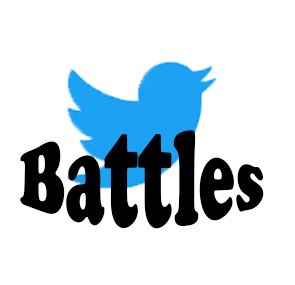
<style>
.page{position:relative;width:295px;height:285px;background:#ffffff}
.page>*{position:absolute;margin:0}
.t1{font:65.3px "CooperBlackStd";color:#000000}
</style>
<div class="page">
<p class="t1" style="left:20px;top:130px;width:244px;height:99px">Battles</p>
</div>
